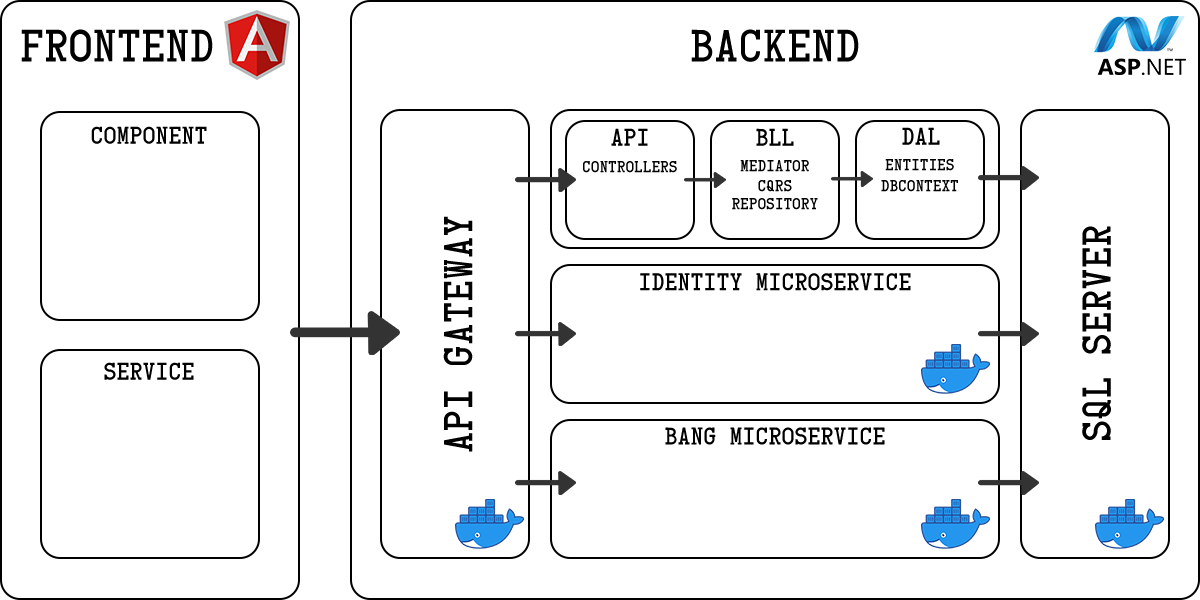
<style>
.page{position:relative;width:1200px;height:600px;background:#ffffff}
.page>*{position:absolute;margin:0}
.t1{font:37.3px "CardCharacters";color:#000000}
.t2{font:20px "CardCharacters";color:#000000}
.t3{font:13.3px "CardCharacters";color:#000000}
.t4{font:33.3px "CardCharacters";color:#000000}
</style>
<div class="page">
<p class="t1" style="left:21px;top:29px;width:192px;height:33px">Frontend</p>
<p class="t1" style="left:691px;top:29px;width:168px;height:33px">Backend</p>
<p class="t2" style="left:91px;top:126px;width:116px;height:18px">Component</p>
<p class="t2" style="left:611px;top:128px;width:37px;height:18px">API</p>
<p class="t2" style="left:756px;top:128px;width:38px;height:18px">Bll</p>
<p class="t2" style="left:902px;top:127px;width:38px;height:18px">DAL</p>
<p class="t3" style="left:583px;top:161px;width:94px;height:12px">Controllers</p>
<p class="t3" style="left:740px;top:160px;width:69px;height:12px">Mediator</p>
<p class="t3" style="left:885px;top:159px;width:69px;height:12px">Entities</p>
<p class="t3" style="left:758px;top:180px;width:34px;height:12px">CQRS</p>
<p class="t3" style="left:881px;top:180px;width:77px;height:12px">DbContext</p>
<p class="t3" style="left:732px;top:198px;width:86px;height:12px">Repository</p>
<p class="t4" style="left:443px;top:216px;width:30px;height:236px;rotate:-90deg">Api Gateway</p>
<p class="t4" style="left:1082px;top:226px;width:29px;height:214px;rotate:-90deg">SQL Server</p>
<p class="t2" style="left:640px;top:273px;width:271px;height:18px">Identity Microservice</p>
<p class="t2" style="left:104px;top:362px;width:90px;height:18px">Service</p>
<p class="t2" style="left:665px;top:427px;width:220px;height:18px">Bang microservice</p>
</div>
